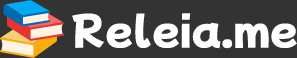
<style>
.page{position:relative;width:297px;height:58px;background:#333333}
.page>*{position:absolute;margin:0}
.t1{font:39px "MochiyPopOne-Regular";color:#ffffff;font-weight:bold}
.t2{font:25px "Stylish-Regular";color:#000000;font-weight:bold}
</style>
<div class="page">
<p class="t1" style="left:72px;top:13px;width:225px;height:36px"><span class="t2"><br><br></span>Releia.me</p>
</div>
